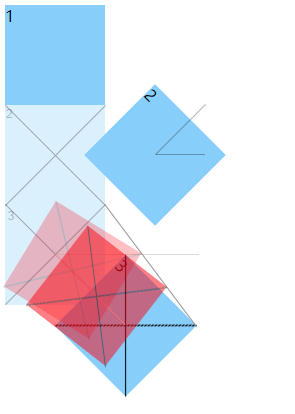
<style>
.page{position:relative;width:295px;height:414px;background:#ffffff}
.page>*{position:absolute;margin:0}
.t1{font:12px "ArialMT";color:#aebec9}
</style>
<div class="page">
<p class="t1" style="left:6px;top:109px;width:7px;height:9px">2</p>
<p class="t1" style="left:8px;top:211px;width:6px;height:9px">3</p>
</div>
